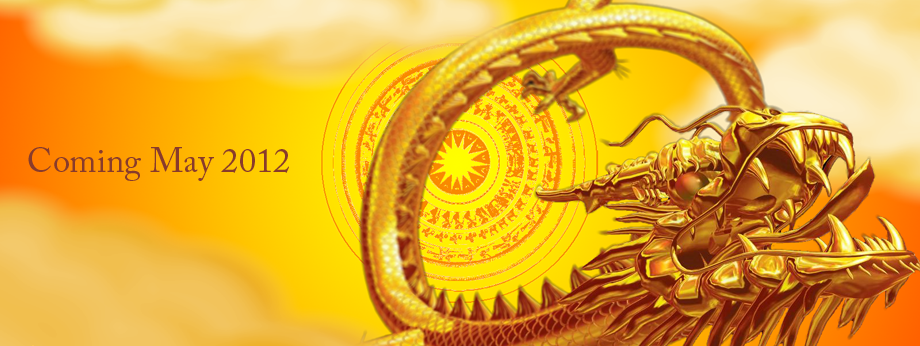
<style>
.page{position:relative;width:920px;height:346px}
.page>*{position:absolute;margin:0}
.t1{font:34.3px "ACaslonPro-Regular";color:#883b2c}
</style>
<div class="page">
<p class="t1" style="left:28px;top:147px;width:261px;height:34px">Coming May 2012</p>
</div>
